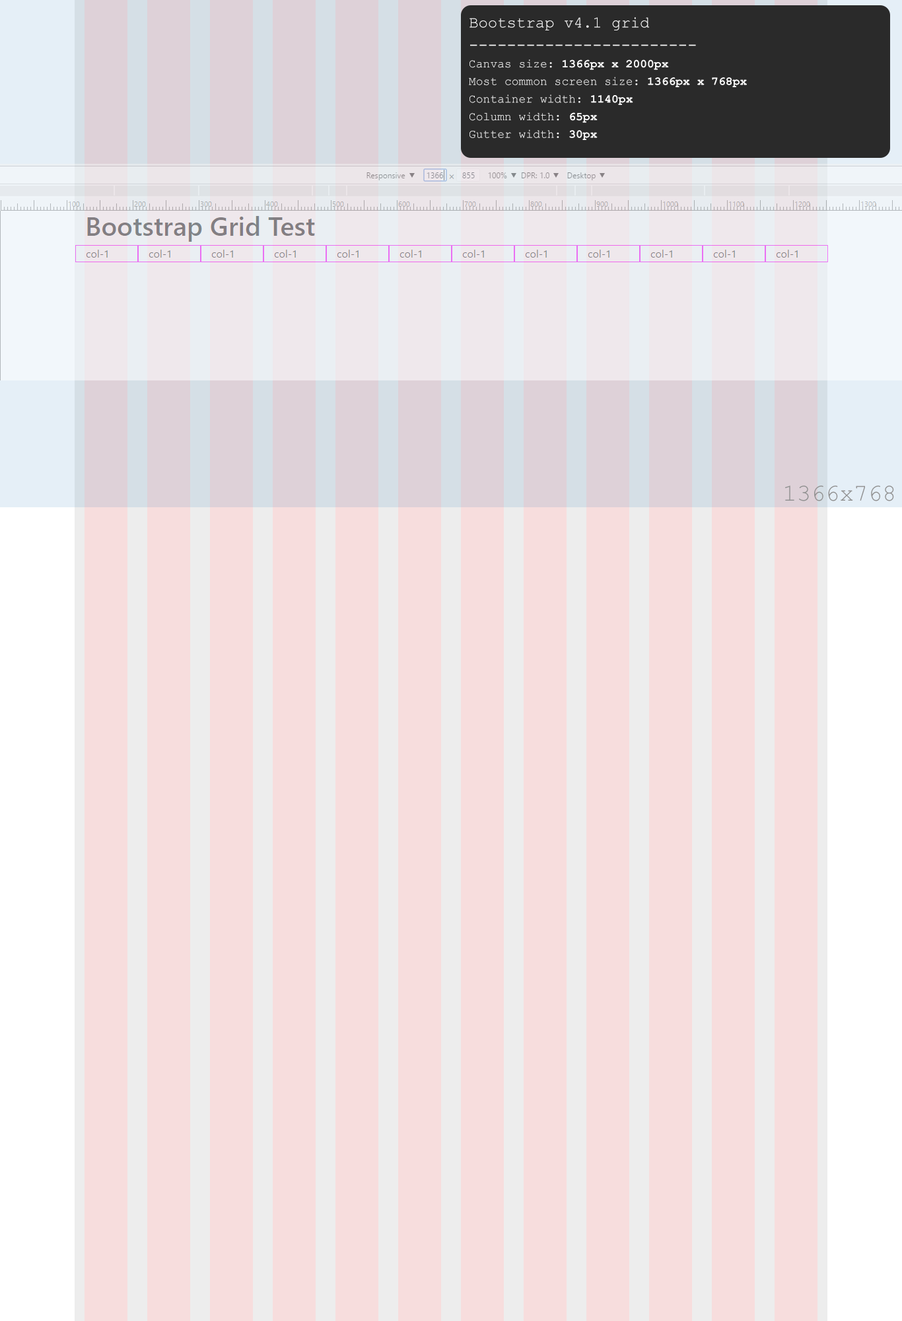
<style>
.page{position:relative;width:902px;height:1321px;background:#f7dddd}
.page>*{position:absolute;margin:0}
.t1{font:15.9px "CourierNewPSMT";color:#ffffff}
.t2{font:11.9px "CourierNewPSMT";color:#ffffff}
.t3{font:11.9px "CourierNewPS-BoldMT";color:#ffffff}
.t4{font:23.8px "CourierNewPSMT";color:#919191}
</style>
<div class="page">
<p class="t1" style="left:469px;top:17px;width:278px;height:123px">Bootstrap v4.1 grid<br>------------------------<br><span class="t2">Canvas size: </span><span class="t3">1366px x 2000px<br></span><span class="t2">Most common screen size:</span><span class="t3"> 1366px x 768px<br></span><span class="t2">Container width: </span><span class="t3">1140px</span><span class="t2"><br>Column width: </span><span class="t3">65px<br></span><span class="t2">Gutter width: </span><span class="t3">30px</span></p>
<p class="t4" style="left:786px;top:486px;width:109px;height:15px">1366x768</p>
</div>
